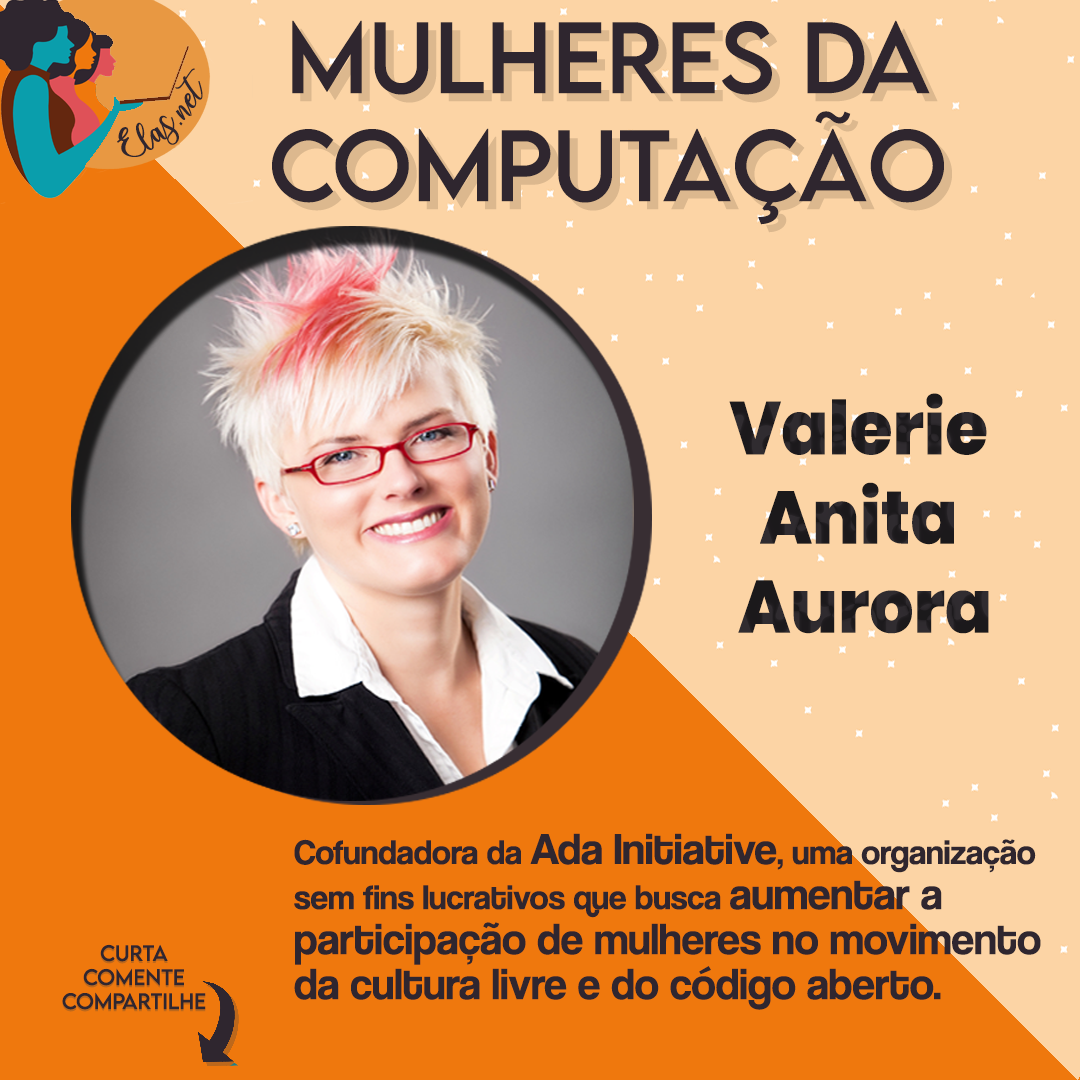
<style>
.page{position:relative;width:1080px;height:1080px;background:#fcd4a5}
.page>*{position:absolute;margin:0}
.t1{font:90px "LEMONMILK-Regular";color:#2f262f}
.t2{font:25px "charlinda-Regular";color:#2f262f;scale:1.18 1}
.t3{font:74.3px "Poppins-ExtraBold";color:#201d20;scale:0.93 1}
.t4{font:45px/45px "CoolveticaRg-Regular";color:#2f262f}
.t5{font:35px/45px "CoolveticaRg-Regular";color:#2f262f}
.t6{font:20px "LEMONMILK-Regular"}
.t7{font:20px "LEMONMILK-Regular";color:#2f262f}
</style>
<div class="page">
<p class="t1" style="left:272px;top:20px;width:672px;height:205px;text-align:center">Mulheres da<br>Computação</p>
<p class="t2" style="left:117px;top:68px;width:86px;height:89px;rotate:-43deg">Elas.net</p>
<p class="t3" style="left:729px;top:393px;width:260px;height:241px;text-align:center">Valerie <br>Anita <br>Aurora</p>
<p class="t4" style="left:294px;top:833px;width:747px;height:177px"><span class="t5">Cofundadora da </span>Ada Initiative<span class="t5">, uma organização <br>sem fins lucrativos que busca </span>aumentar a <br>participação de mulheres no movimento <br>da cultura livre e do código aberto.</p>
<p class="t6" style="left:62px;top:946px;width:144px;height:66px;text-align:center">Curta<br>Comente<br>Compartilhe</p>
<p class="t7" style="left:62px;top:944px;width:144px;height:66px;text-align:center">Curta<br>Comente<br>Compartilhe</p>
</div>
